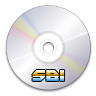
<style>
.page{position:relative;width:96px;height:96px;background:#ffffff}
.page>*{position:absolute;margin:0}
.t1{font:18px "Uranium"}
</style>
<div class="page">
<p class="t1" style="left:32px;top:70px;width:33px;height:11px">SBI</p>
</div>
